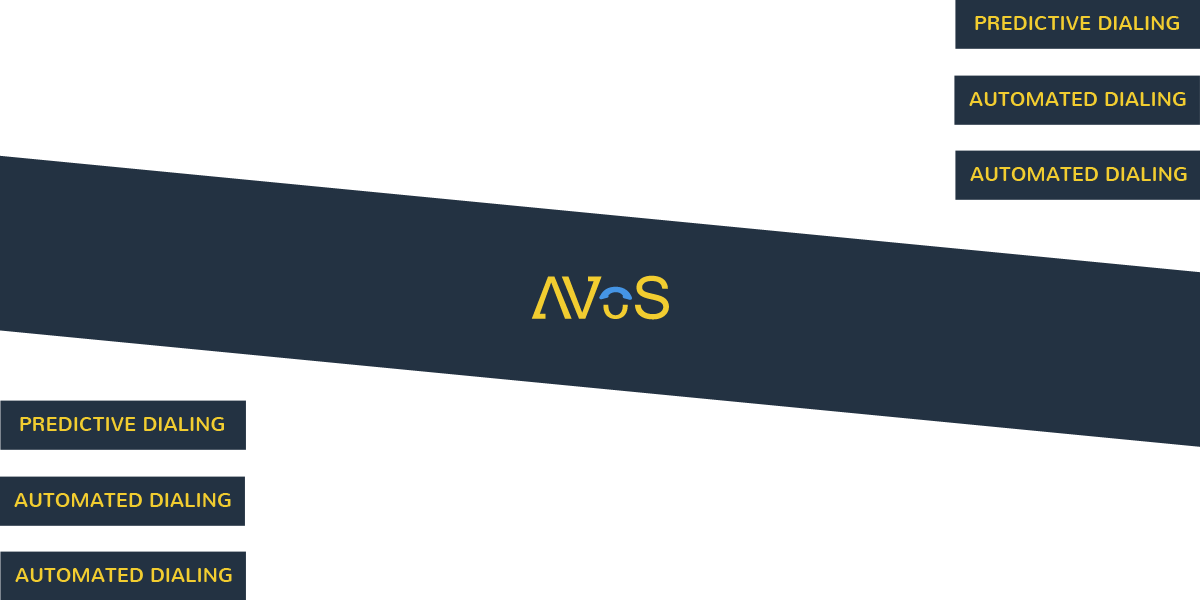
<style>
.page{position:relative;width:1200px;height:600px;background:#ffffff}
.page>*{position:absolute;margin:0}
.t1{font:20px "Nunito-Regular";color:#f2cd30;text-transform:uppercase}
</style>
<div class="page">
<p class="t1" style="left:975px;top:16px;width:204px;height:14px">Predictive Dialing</p>
<p class="t1" style="left:969px;top:92px;width:217px;height:14px">automated dialing</p>
<p class="t1" style="left:970px;top:167px;width:217px;height:14px">automated dialing</p>
<p class="t1" style="left:20px;top:417px;width:204px;height:14px">Predictive Dialing</p>
<p class="t1" style="left:14px;top:493px;width:217px;height:14px">automated dialing</p>
<p class="t1" style="left:15px;top:568px;width:217px;height:14px">automated dialing</p>
</div>
